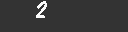
<style>
.page{position:relative;width:128px;height:32px;background:#333333}
.page>*{position:absolute;margin:0}
.t1{font:27.9px "DomDiagonalBT-Regular";letter-spacing:0.05em;color:#fbfbfb}
</style>
<div class="page">
<p class="t1" style="left:36px;top:1px;width:11px;height:17px">2</p>
</div>
